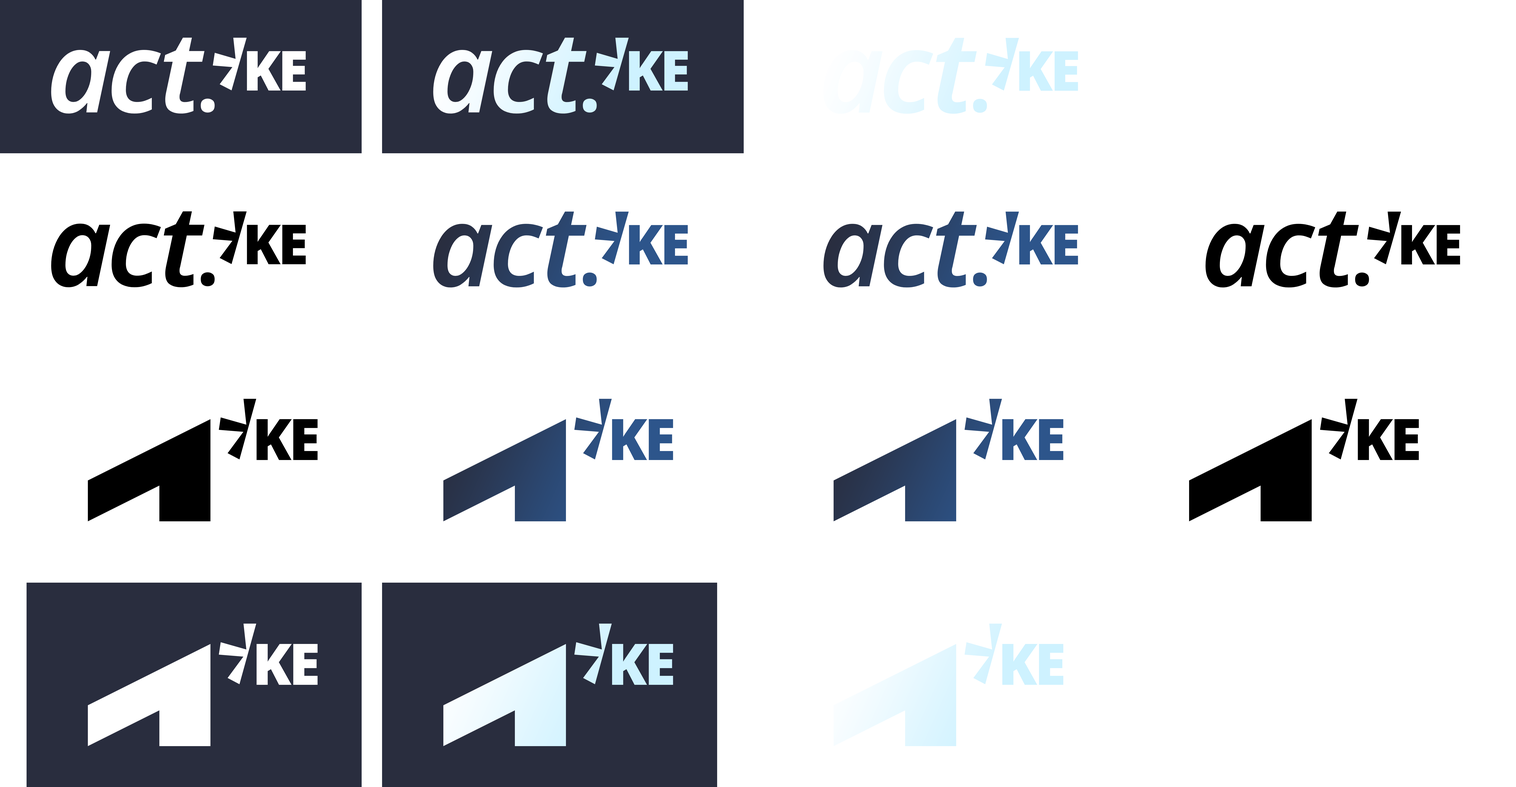
<style>
.page{position:relative;width:1516px;height:787px;background:#ffffff}
.page>*{position:absolute;margin:0}
.t1{font:55.1px "NotoSans-Black";letter-spacing:-0.046em;color:#ffffff}
.t2{font:55.1px "NotoSans-Black";letter-spacing:-0.046em;color:#cef2ff}
.t3{font:55.1px "NotoSans-Black";letter-spacing:-0.046em;color:#000000}
.t4{font:55.1px "NotoSans-Black";letter-spacing:-0.046em;color:#2d558b}
.t5{font:57.2px "NotoSans-Black";letter-spacing:-0.046em;color:#000000}
.t6{font:57.2px "NotoSans-Black";letter-spacing:-0.046em;color:#2d558b}
.t7{font:57.2px "NotoSans-Black";letter-spacing:-0.046em;color:#ffffff}
.t8{font:57.2px "NotoSans-Black";letter-spacing:-0.046em;color:#cef2ff}
</style>
<div class="page">
<p class="t1" style="left:247px;top:51px;width:59px;height:40px">KE</p>
<p class="t2" style="left:629px;top:51px;width:59px;height:40px">KE</p>
<p class="t2" style="left:1019px;top:51px;width:59px;height:40px">KE</p>
<p class="t3" style="left:247px;top:225px;width:59px;height:39px">KE</p>
<p class="t4" style="left:629px;top:225px;width:59px;height:40px">KE</p>
<p class="t4" style="left:1019px;top:225px;width:59px;height:40px">KE</p>
<p class="t3" style="left:1401px;top:225px;width:59px;height:40px">KE</p>
<p class="t5" style="left:256px;top:419px;width:62px;height:41px">KE</p>
<p class="t6" style="left:612px;top:419px;width:61px;height:41px">KE</p>
<p class="t6" style="left:1002px;top:419px;width:61px;height:41px">KE</p>
<p class="t5" style="left:1357px;top:419px;width:62px;height:41px">KE</p>
<p class="t7" style="left:256px;top:643px;width:62px;height:42px">KE</p>
<p class="t8" style="left:612px;top:643px;width:61px;height:42px">KE</p>
<p class="t8" style="left:1002px;top:643px;width:61px;height:42px">KE</p>
</div>
